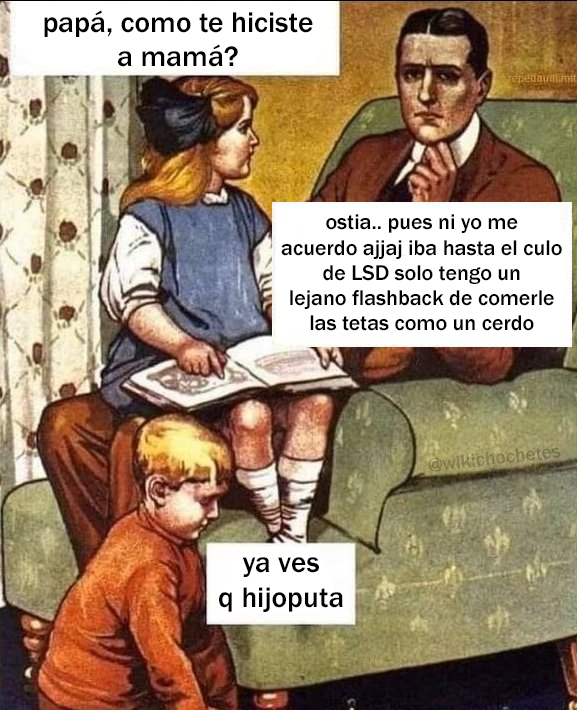
<style>
.page{position:relative;width:577px;height:710px}
.page>*{position:absolute;margin:0}
.t1{font:29.6px "FranklinGothic-Medium";color:#000000}
.t2{font:22px "FranklinGothic-Medium";color:#000000}
.t3{font:29.4px "FranklinGothic-Medium";color:#000000}
</style>
<div class="page">
<p class="t1" style="left:44px;top:10px;width:269px;height:57px;text-align:center">papá, como te hiciste<br>a mamá?</p>
<p class="t2" style="left:281px;top:214px;width:281px;height:117px;text-align:center">ostia.. pues ni yo me<br>acuerdo ajjaj iba hasta el culo<br>de LSD solo tengo un<br>lejano flashback de comerle<br>las tetas como un cerdo</p>
<p class="t3" style="left:219px;top:557px;width:124px;height:55px;text-align:center">ya ves<br>q hijoputa</p>
</div>
